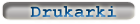
<style>
.page{position:relative;width:140px;height:24px}
.page>*{position:absolute;margin:0}
.t1{font:18px "CourierNewPS-BoldMT"}
</style>
<div class="page">
<p class="t1" style="left:30px;top:6px;width:87px;height:12px">Drukarki</p>
</div>
